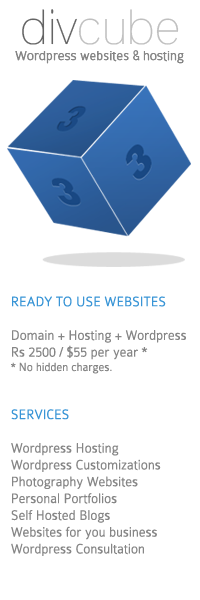
<style>
.page{position:relative;width:200px;height:600px;background:#ffffff}
.page>*{position:absolute;margin:0}
.t1{font:14px "Colaborate-Thin";color:#868686;font-weight:bold}
.t2{font:14px "Colaborate-Thin";color:#3995d6;font-weight:bold}
.t3{font:12px "Colaborate-Thin";color:#868686;font-weight:bold}
</style>
<div class="page">
<p class="t1" style="left:15px;top:50px;width:169px;height:14px">Wordpress websites &amp; hosting</p>
<p class="t1" style="left:11px;top:296px;width:175px;height:260px"><span class="t2">READY TO USE WEBSITES<br><br></span>Domain + Hosting + Wordpress<br>Rs 2500 / $55 per year *<br><span class="t3">* No hidden charges.<br><br><br></span><span class="t2">SERVICES<br><br></span>Wordpress Hosting<br>Wordpress Customizations<br>Photography Websites<br>Personal Portfolios<br>Self Hosted Blogs <br>Websites for you business<br>Wordpress Consultation</p>
</div>
